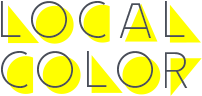
<style>
.page{position:relative;width:202px;height:96px;background:#ffffff}
.page>*{position:absolute;margin:0}
.t1{font:56.6px "Idler-Inner";letter-spacing:-0.05em;color:#4a4f59}
</style>
<div class="page">
<p class="t1" style="left:1px;top:1px;width:184px;height:37px">local</p>
<p class="t1" style="left:1px;top:51px;width:187px;height:37px">color</p>
</div>
